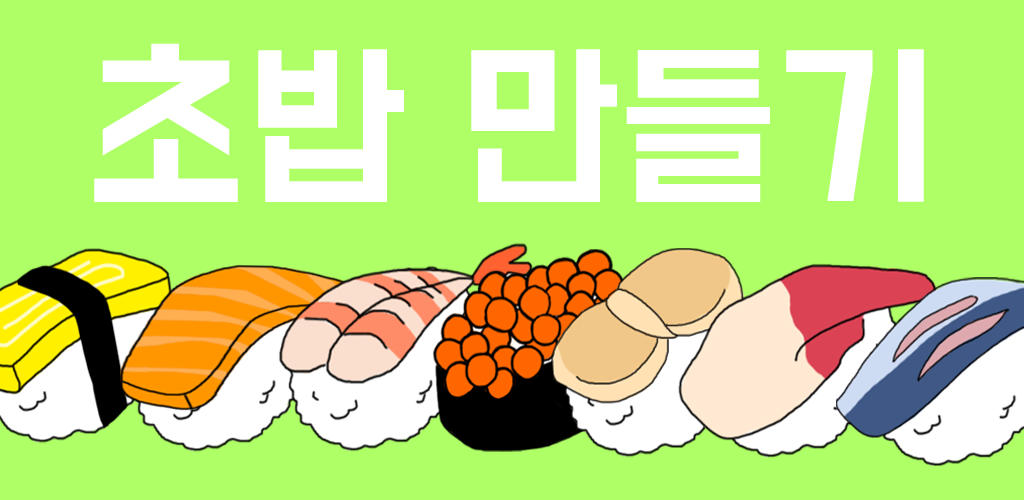
<style>
.page{position:relative;width:1024px;height:500px;background:#afff67}
.page>*{position:absolute;margin:0}
.t1{font:161.1px "BMDoHyeon";color:#ffffff;scale:1.03 1}
</style>
<div class="page">
<p class="t1" style="left:94px;top:43px;width:830px;height:159px">초밥 만들기</p>
</div>
